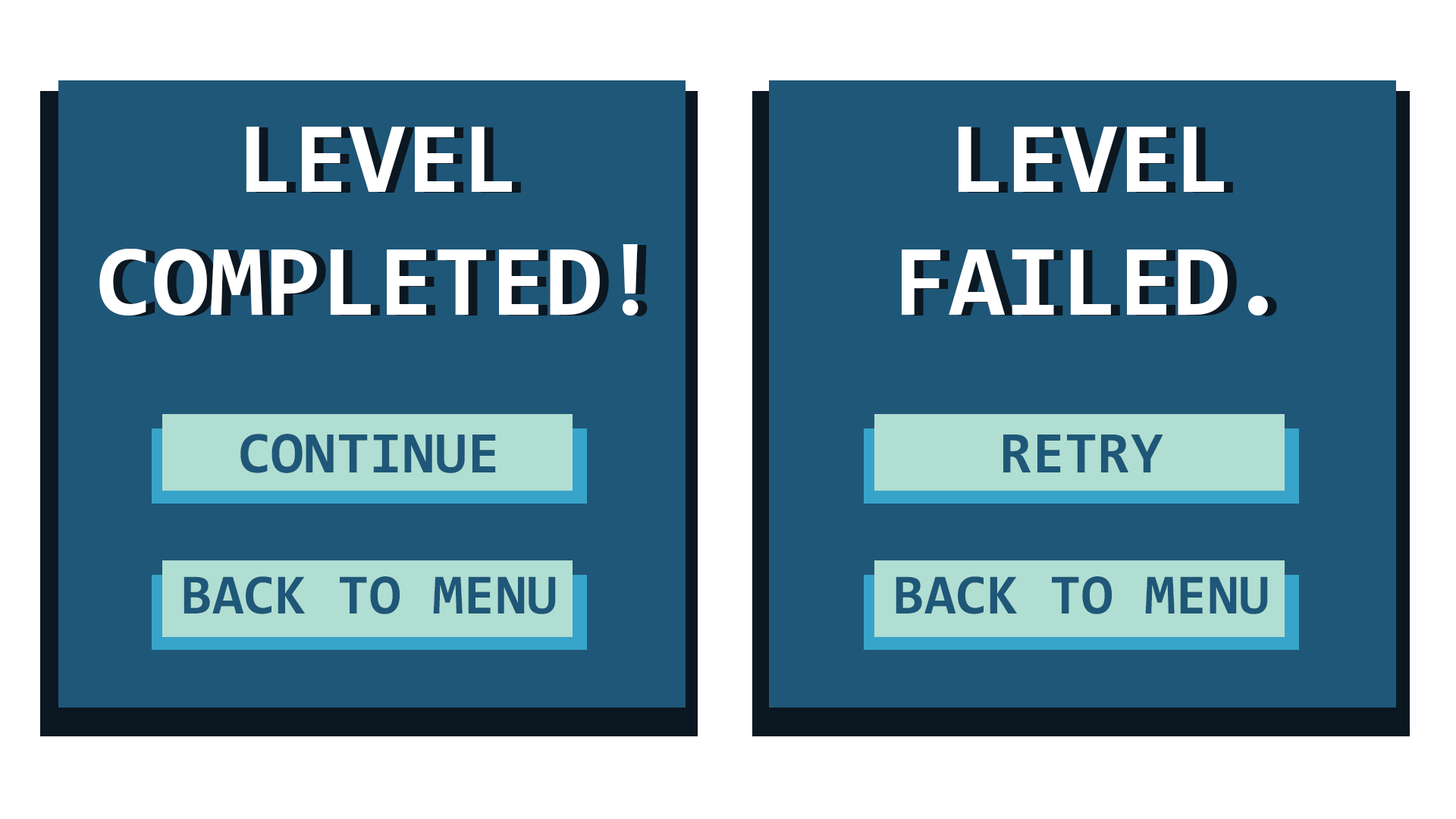
<style>
.page{position:relative;width:1456px;height:819px;background:#1f5778}
.page>*{position:absolute;margin:0}
.t1{font:102.4px "Consolas-Bold";color:#ffffff}
.t2{font:59.5px "Consolas-Bold";color:#1f5778}
.t3{font:57.2px "Consolas-Bold";color:#1f5778}
</style>
<div class="page">
<p class="t1" style="left:99px;top:127px;width:540px;height:188px;text-align:center">LEVEL<br>COMPLETED!</p>
<p class="t1" style="left:902px;top:127px;width:366px;height:188px;text-align:center">LEVEL<br>FAILED.</p>
<p class="t2" style="left:240px;top:434px;width:256px;height:39px">CONTINUE</p>
<p class="t2" style="left:1003px;top:435px;width:160px;height:37px">RETRY</p>
<p class="t3" style="left:184px;top:576px;width:372px;height:38px">BACK TO MENU</p>
<p class="t3" style="left:896px;top:576px;width:372px;height:38px">BACK TO MENU</p>
</div>
